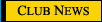
<style>
.page{position:relative;width:102px;height:22px;background:#f9d305}
.page>*{position:absolute;margin:0}
.t1{font:12px "TimesNewRomanPSMT";color:#000000}
.t2{font:14px "TimesNewRomanPSMT";color:#000000}
</style>
<div class="page">
<p class="t1" style="left:17px;top:5px;width:72px;height:11px"><span class="t2">C</span>LUB<span class="t2"> N</span>EWS</p>
</div>
